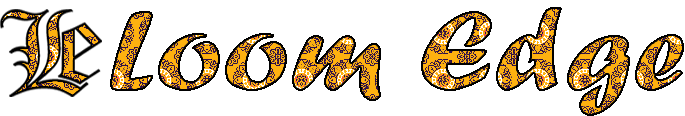
<style>
.page{position:relative;width:685px;height:116px;background:#ffffff}
.page>*{position:absolute;margin:0}
.t1{font:118.6px "ForteMT";scale:1.04 1}
</style>
<div class="page">
<p class="t1" style="left:110px;top:7px;width:574px;height:109px">Loom Edge</p>
</div>
